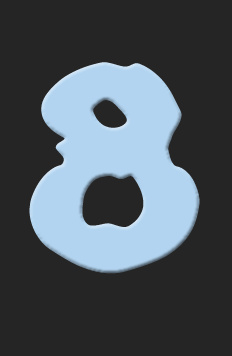
<style>
.page{position:relative;width:232px;height:356px;background:#252525}
.page>*{position:absolute;margin:0}
.t1{font:300px "Misbehavin'";color:#b2d4f0}
</style>
<div class="page">
<p class="t1" style="left:29px;top:62px;width:171px;height:212px">8</p>
</div>
